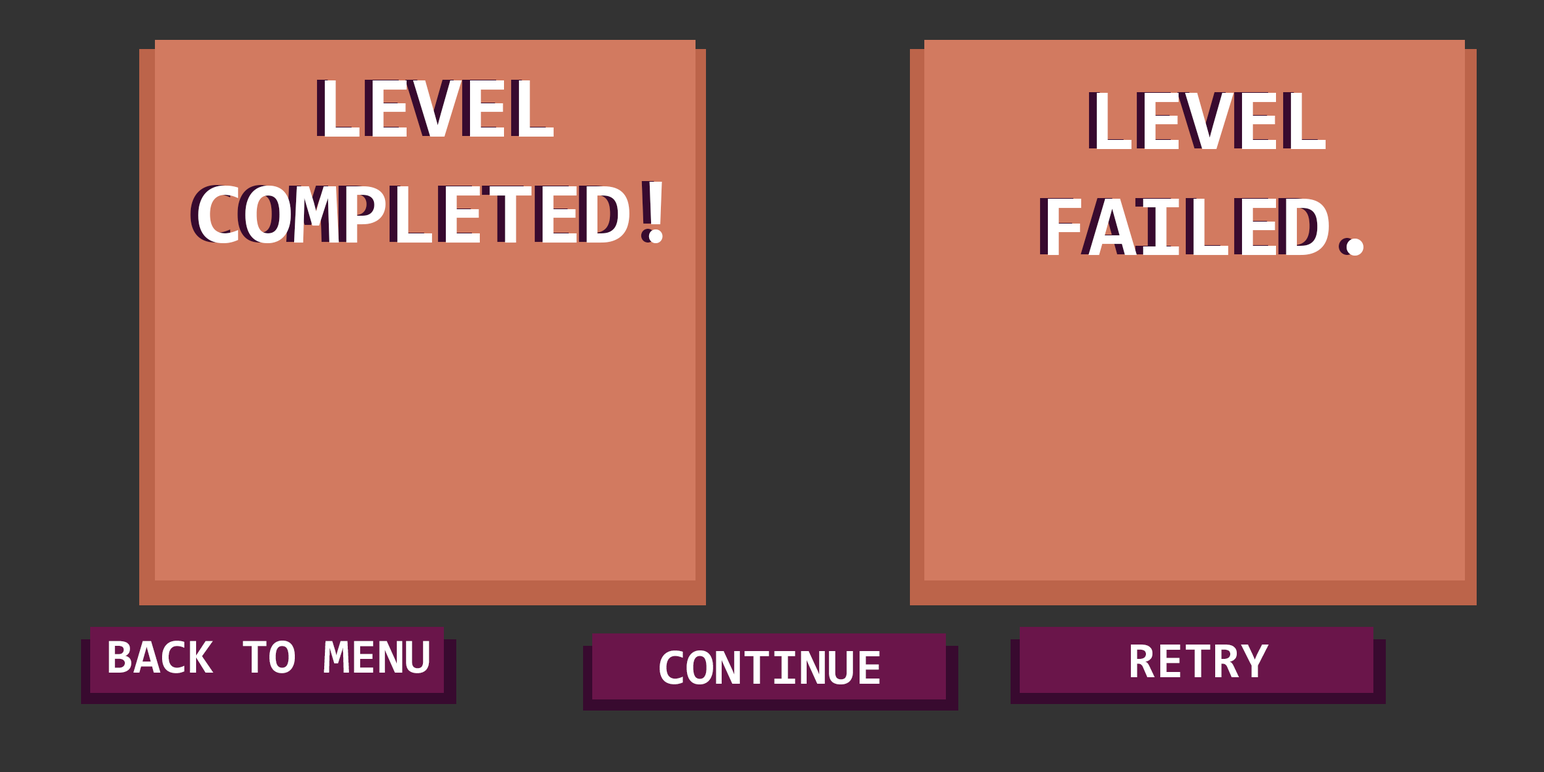
<style>
.page{position:relative;width:1544px;height:772px;background:#d27a60}
.page>*{position:absolute;margin:0}
.t1{font:88.3px "Consolas-Bold"}
.t2{font:88.3px "Consolas-Bold";color:#ffffff}
.t3{font:49.3px "Consolas-Bold";color:#ffffff}
.t4{font:51.3px "Consolas-Bold";color:#ffffff}
</style>
<div class="page">
<p class="t1" style="left:190px;top:80px;width:465px;height:163px;text-align:center">LEVEL<br>COMPLETED!</p>
<p class="t2" style="left:198px;top:80px;width:465px;height:163px;text-align:center">LEVEL<br>COMPLETED!</p>
<p class="t1" style="left:1040px;top:92px;width:316px;height:163px;text-align:center">LEVEL<br>FAILED.</p>
<p class="t2" style="left:1048px;top:93px;width:316px;height:163px;text-align:center">LEVEL<br>FAILED.</p>
<p class="t3" style="left:109px;top:641px;width:321px;height:32px">BACK TO MENU</p>
<p class="t4" style="left:660px;top:651px;width:220px;height:34px">CONTINUE</p>
<p class="t4" style="left:1131px;top:645px;width:138px;height:32px">RETRY</p>
</div>
